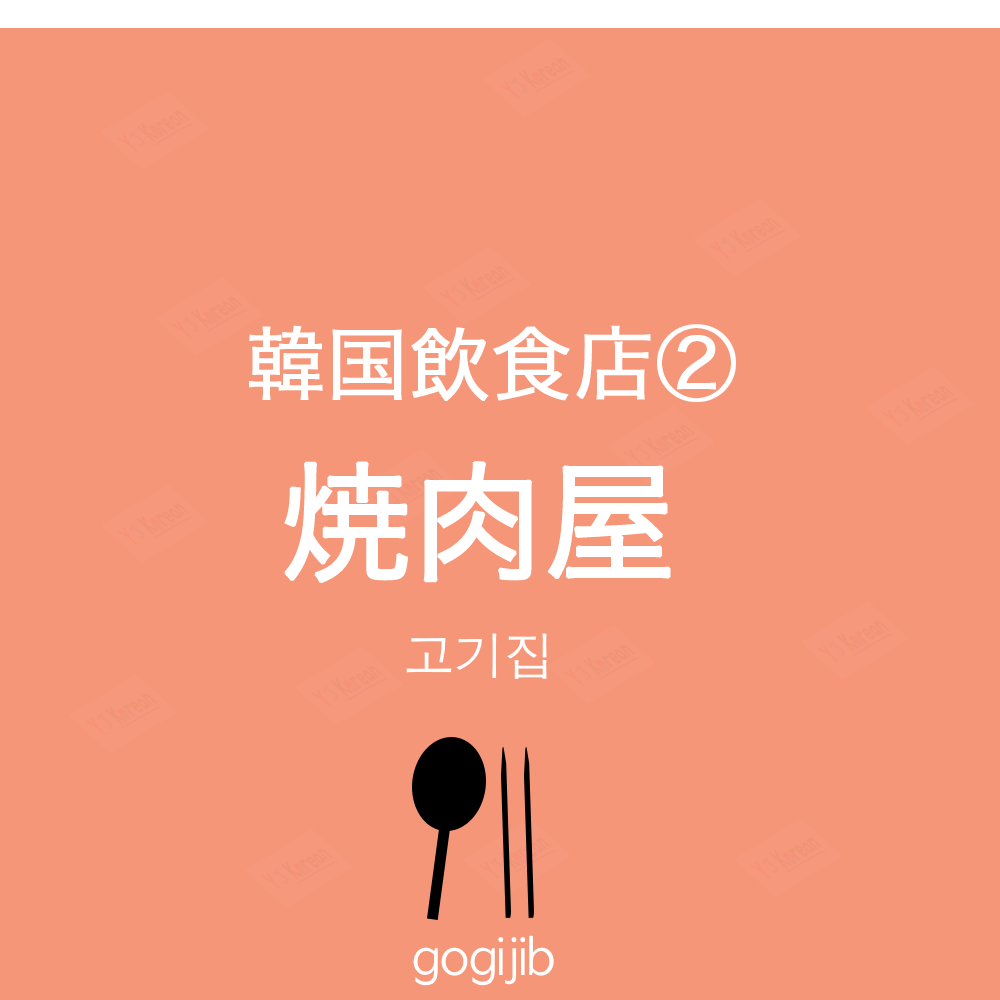
<style>
.page{position:relative;width:1000px;height:1000px;background:#f69679}
.page>*{position:absolute;margin:0}
.t1{font:80px "HiraKakuProN-W3";color:#ffffff;font-weight:bold}
.t2{font:130px "HiraKakuProN-W3";color:#ffffff;font-weight:bold}
.t3{font:50px "AppleGothic";color:#ffffff}
</style>
<div class="page">
<p class="t1" style="left:249px;top:324px;width:487px;height:78px">韓国飲食店②</p>
<p class="t2" style="left:284px;top:461px;width:387px;height:122px">焼肉屋</p>
<p class="t3" style="left:406px;top:633px;width:141px;height:46px">고기집</p>
<p class="t3" style="left:413px;top:935px;width:141px;height:51px">gogijib</p>
</div>
